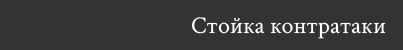
<style>
.page{position:relative;width:403px;height:50px;background:#333333}
.page>*{position:absolute;margin:0}
.t1{font:24px "CrimsonText-Regular";color:#ffffff}
</style>
<div class="page">
<p class="t1" style="left:191px;top:17px;width:195px;height:22px">Стойка контратаки</p>
</div>
